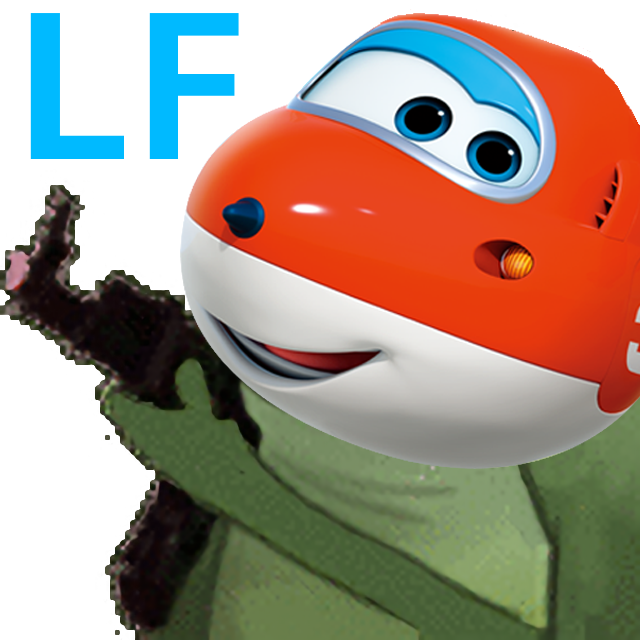
<style>
.page{position:relative;width:640px;height:640px;background:#ffffff}
.page>*{position:absolute;margin:0}
.t1{font:200px "MigMix-2P-Bold";color:#00baff}
</style>
<div class="page">
<p class="t1" style="left:30px;top:13px;width:209px;height:146px">LF</p>
</div>
